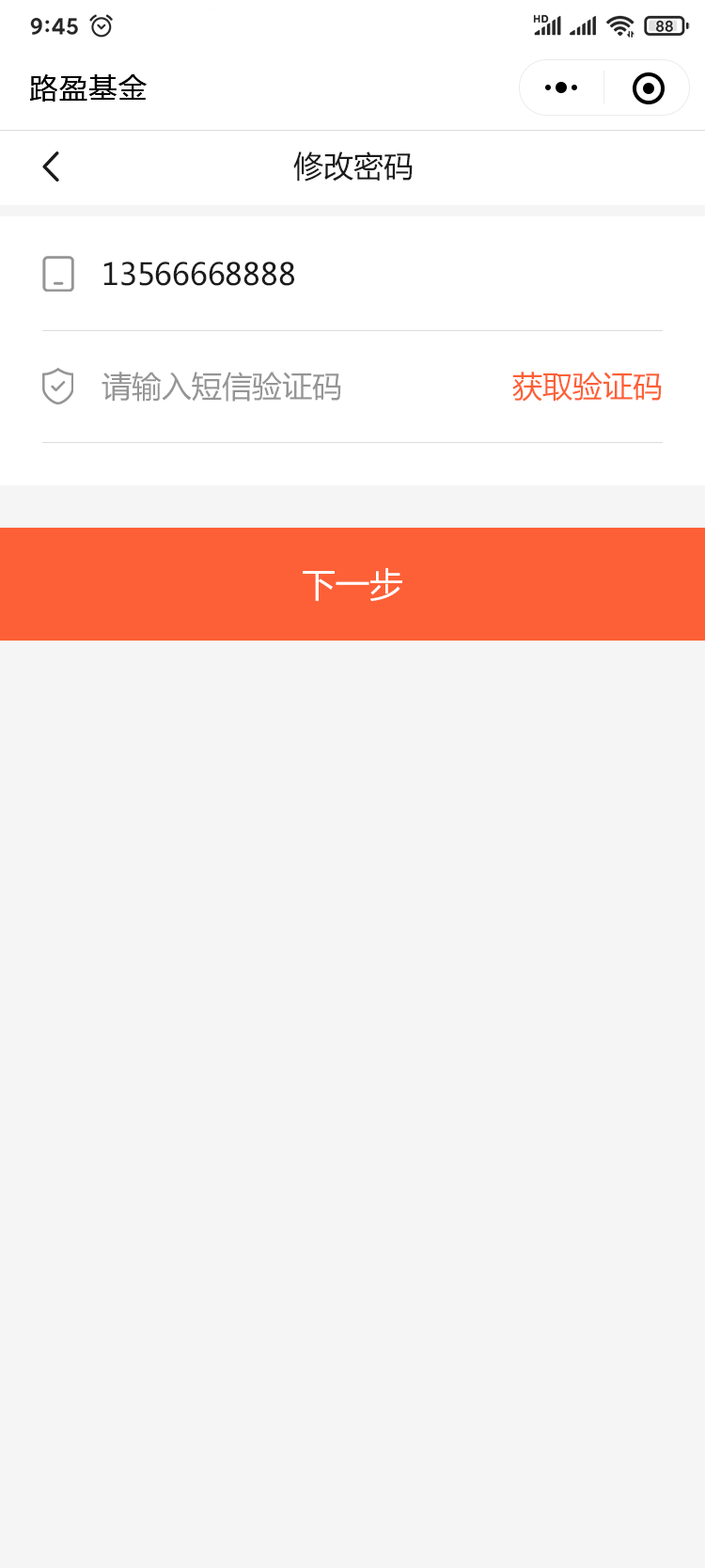
<style>
.page{position:relative;width:705px;height:1568px;background:#f5f5f5}
.page>*{position:absolute;margin:0}
.t1{font:28.2px "MicrosoftYaHei";letter-spacing:0.05em;color:#000000}
.t2{font:30.1px "MicrosoftYaHei";color:#1b1b1b}
.t3{font:30.1px "MicrosoftYaHei";color:#959595}
.t4{font:30.1px "MicrosoftYaHei";color:#fd6036}
.t5{font:33.9px "MicrosoftYaHei";color:#ffffff}
</style>
<div class="page">
<p class="t1" style="left:29px;top:74px;width:118px;height:28px">路盈基金</p>
<p class="t2" style="left:293px;top:151px;width:120px;height:31px">修改密码</p>
<p class="t2" style="left:103px;top:261px;width:191px;height:25px">13566668888</p>
<p class="t3" style="left:102px;top:372px;width:239px;height:30px">请输入短信验证码</p>
<p class="t4" style="left:513px;top:372px;width:149px;height:30px">获取验证码</p>
<p class="t5" style="left:303px;top:568px;width:100px;height:33px">下一步</p>
</div>
